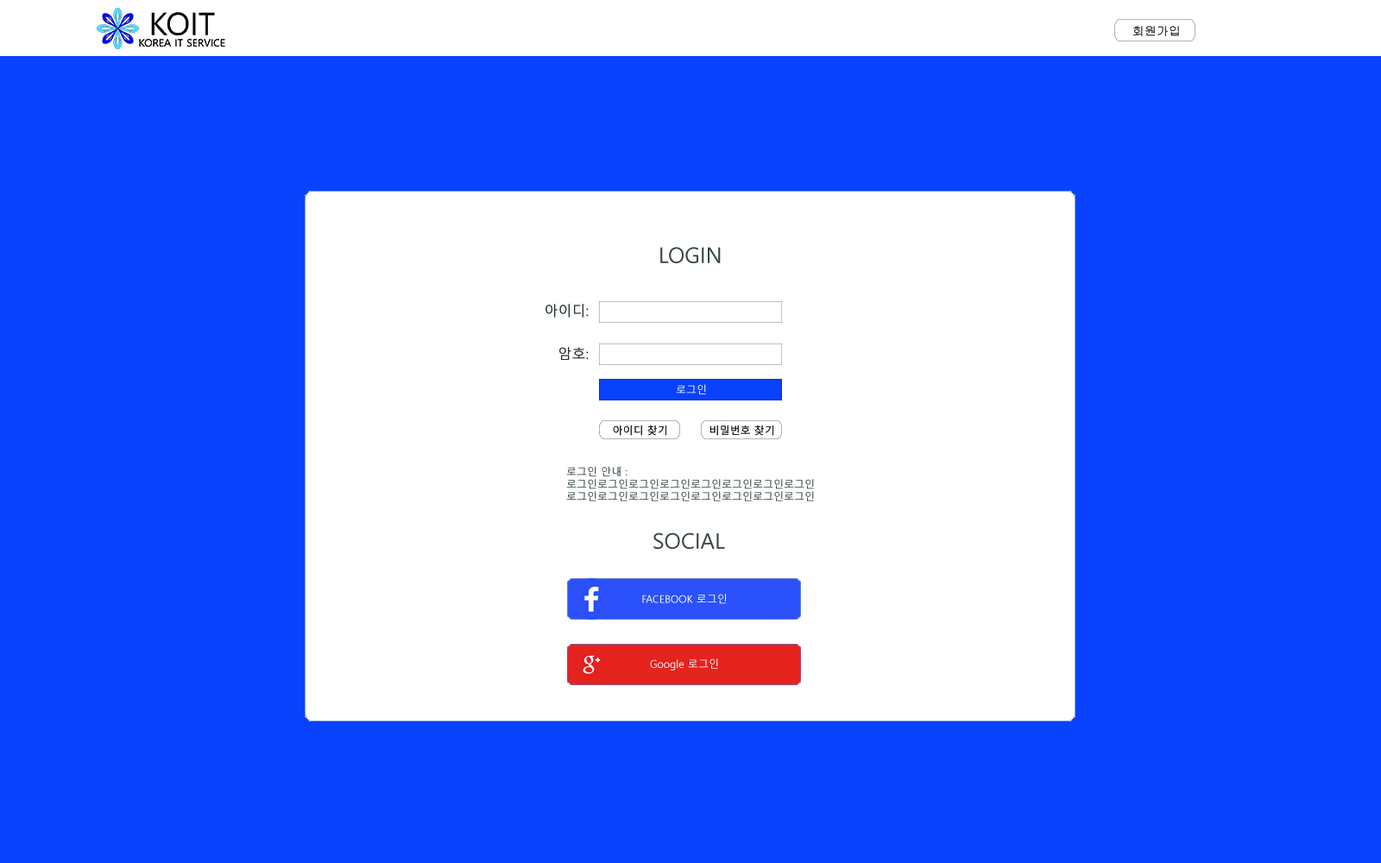
<style>
.page{position:relative;width:1381px;height:863px;background:#0842fd}
.page>*{position:absolute;margin:0}
.t1{font:12.1px "Gulim";color:#060808}
.t2{font:21.6px "MalgunGothic";color:#384446}
.t3{font:13.8px/43.2px "MalgunGothic";color:#242b2c}
.t4{font:10.4px "MalgunGothic";color:#ffffff}
.t5{font:10.4px "MalgunGothic";color:#060808}
.t6{font:10.4px "MalgunGothic";color:#3d4a4b}
.t7{font:21.5px "MalgunGothic";color:#384446}
.t8{font:10.7px "MalgunGothic";color:#ffffff;scale:0.97 1}
</style>
<div class="page">
<p class="t1" style="left:1134px;top:26px;width:45px;height:10px">회원가입</p>
<p class="t2" style="left:660px;top:247px;width:61px;height:16px">LOGIN</p>
<p class="t3" style="left:546px;top:304px;width:43px;height:56px;text-align:right">아이디:<br>암호:</p>
<p class="t4" style="left:676px;top:384px;width:30px;height:11px">로그인</p>
<p class="t5" style="left:613px;top:426px;width:53px;height:10px">아이디 찾기</p>
<p class="t5" style="left:710px;top:426px;width:64px;height:10px">비밀번호 찾기</p>
<p class="t6" style="left:566px;top:466px;width:248px;height:36px">로그인 안내 :<br>로그인로그인로그인로그인로그인로그인로그인로그인<br>로그인로그인로그인로그인로그인로그인로그인로그인</p>
<p class="t7" style="left:654px;top:533px;width:71px;height:16px">SOCIAL</p>
<p class="t4" style="left:642px;top:594px;width:85px;height:10px">FACEBOOK 로그인</p>
<p class="t8" style="left:650px;top:659px;width:68px;height:12px">Google 로그인</p>
</div>
